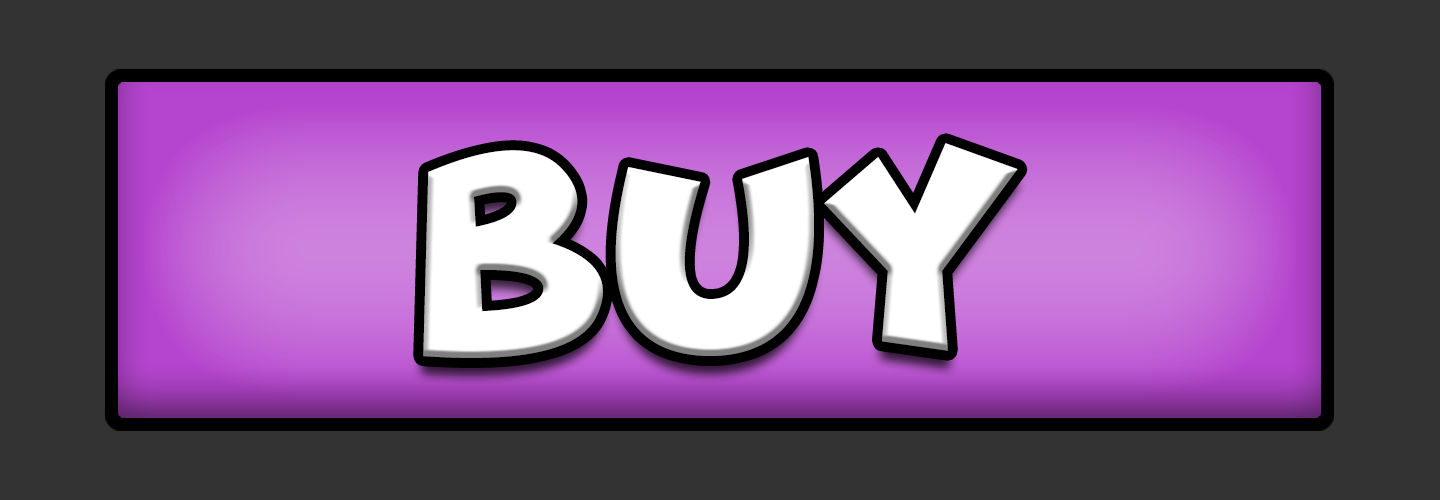
<style>
.page{position:relative;width:1440px;height:500px;background:#333333}
.page>*{position:absolute;margin:0}
.t1{font:290.6px "Funhouse";color:#ffffff;scale:0.95 1}
</style>
<div class="page">
<p class="t1" style="left:423px;top:143px;width:595px;height:215px">BUY</p>
</div>
